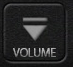
<style>
.page{position:relative;width:73px;height:67px}
.page>*{position:absolute;margin:0}
.t1{font:12px "MyriadPro-Regular"}
</style>
<div class="page">
<p class="t1" style="left:13px;top:48px;width:43px;height:9px">VOLUME</p>
</div>
